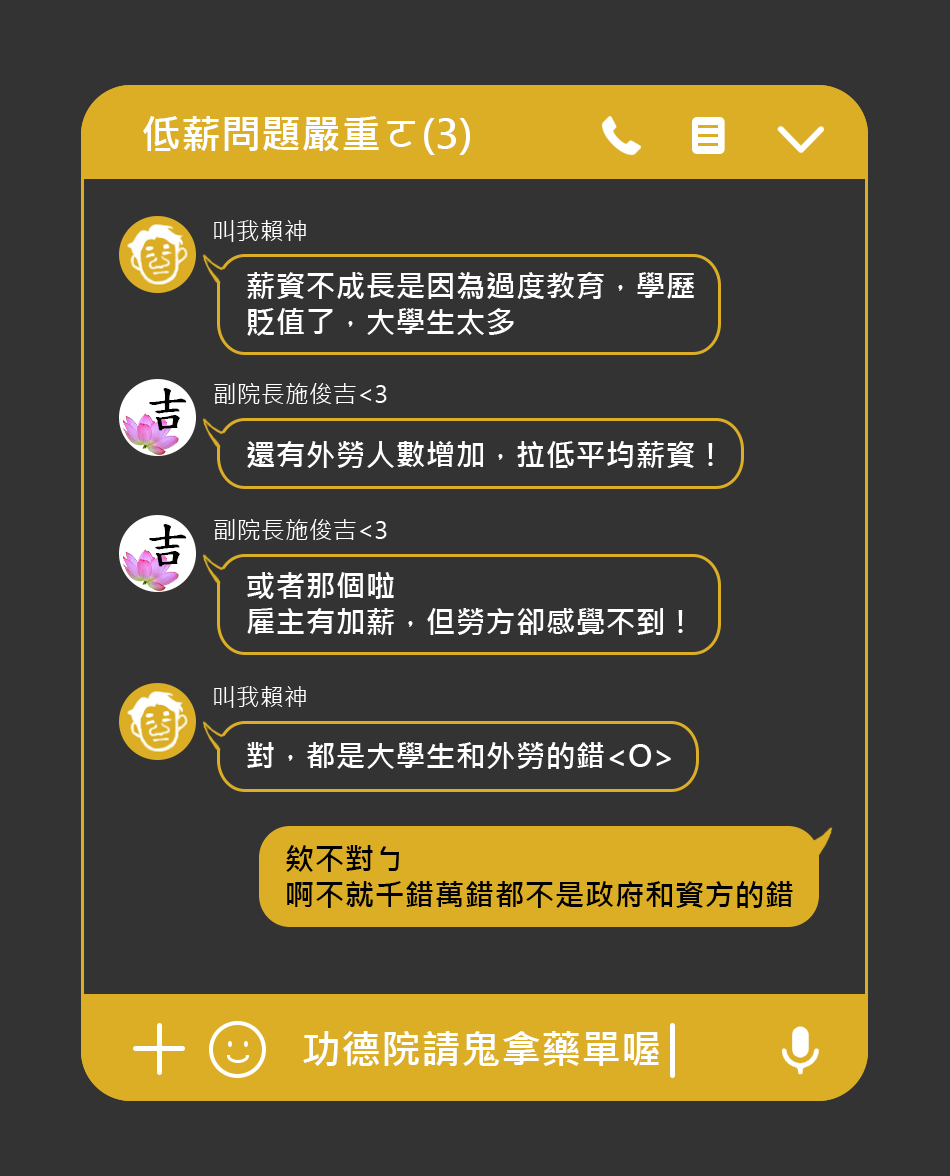
<style>
.page{position:relative;width:950px;height:1176px;background:#333333}
.page>*{position:absolute;margin:0}
.t1{font:40px "MicrosoftJhengHeiBold";color:#ffffff}
.t2{font:24px "MicrosoftJhengHeiRegular";color:#ffffff}
.t3{font:30px/36px "MicrosoftJhengHeiBold";color:#ffffff}
.t4{font:48px "DFKaiShu-SB-Estd-BF";color:#000000;font-weight:bold}
.t5{font:30px "MicrosoftJhengHeiBold";color:#ffffff}
.t6{font:30px/36px "MicrosoftJhengHeiBold";color:#000000}
</style>
<div class="page">
<p class="t1" style="left:143px;top:116px;width:327px;height:39px">低薪問題嚴重ㄛ(3)</p>
<p class="t2" style="left:214px;top:220px;width:92px;height:22px">叫我賴神</p>
<p class="t3" style="left:247px;top:272px;width:448px;height:64px">薪資不成長是因為過度教育，學歷<br>貶值了，大學生太多</p>
<p class="t4" style="left:149px;top:388px;width:38px;height:43px">吉</p>
<p class="t2" style="left:214px;top:383px;width:173px;height:21px">副院長施俊吉&lt;3</p>
<p class="t5" style="left:247px;top:441px;width:466px;height:27px">還有外勞人數增加，拉低平均薪資！</p>
<p class="t2" style="left:214px;top:519px;width:173px;height:21px">副院長施俊吉&lt;3</p>
<p class="t4" style="left:149px;top:524px;width:38px;height:43px">吉</p>
<p class="t3" style="left:247px;top:572px;width:436px;height:63px">或者那個啦<br>雇主有加薪，但勞方卻感覺不到！</p>
<p class="t2" style="left:214px;top:686px;width:92px;height:22px">叫我賴神</p>
<p class="t5" style="left:247px;top:742px;width:424px;height:27px">對，都是大學生和外勞的錯&lt;O&gt;</p>
<p class="t6" style="left:286px;top:845px;width:507px;height:63px">欸不對ㄅ<br>啊不就千錯萬錯都不是政府和資方的錯</p>
<p class="t1" style="left:303px;top:1031px;width:356px;height:35px">功德院請鬼拿藥單喔</p>
</div>
